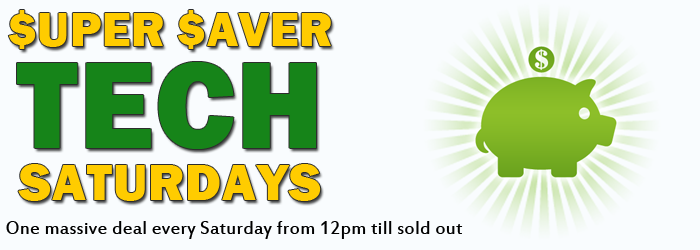
<style>
.page{position:relative;width:700px;height:250px;background:#f9fcfe}
.page>*{position:absolute;margin:0}
.t1{font:48.9px/34.2px "FranklinGothic-Heavy";letter-spacing:0.01em;color:#ffcc00}
.t2{font:51.3px/34.2px "FranklinGothic-Heavy";letter-spacing:0.01em;color:#000000}
.t3{font:128.2px/34.2px "FranklinGothic-Heavy";letter-spacing:0.01em;color:#168419}
.t4{font:53.4px/34.2px "FranklinGothic-Heavy";letter-spacing:0.01em;color:#ffcc00}
.t5{font:20px "EstrangeloEdessa";letter-spacing:0.01em;color:#000000}
</style>
<div class="page">
<p class="t1" style="left:8px;top:10px;width:323px;height:191px;text-align:center"><span class="t2"><br></span>$UPER $AVER<br><span class="t3">TECH<br></span><span class="t4">SATURDAYS</span></p>
<p class="t5" style="left:6px;top:221px;width:457px;height:18px">One massive deal every Saturday from 12pm till sold out</p>
</div>
